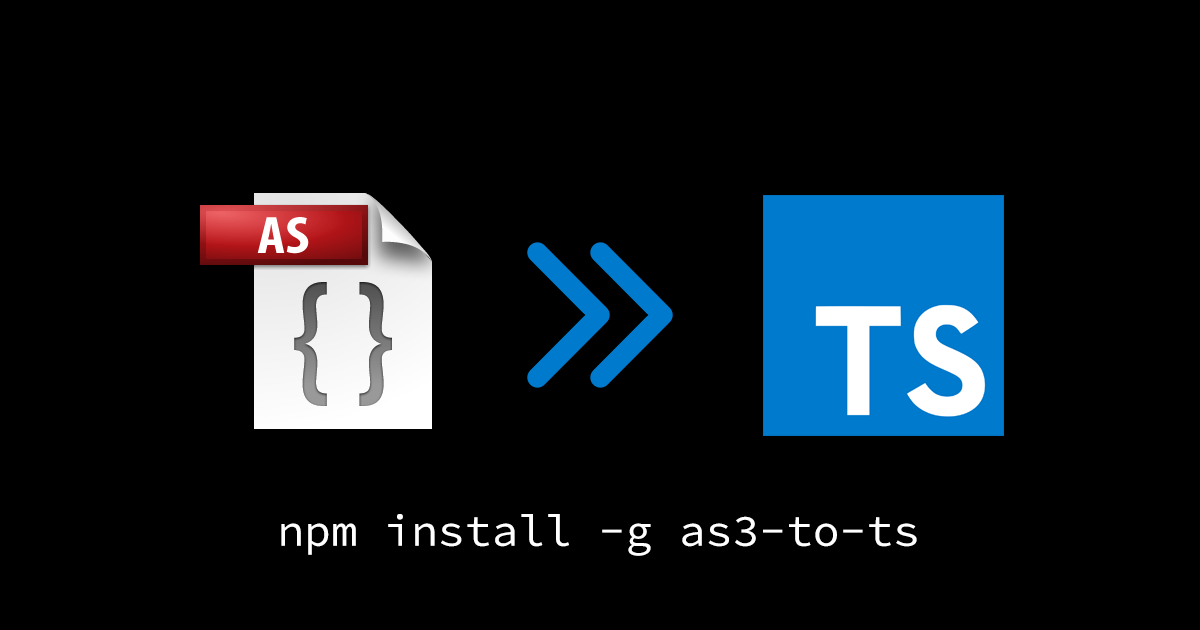
<style>
.page{position:relative;width:1200px;height:630px;background:#000000}
.page>*{position:absolute;margin:0}
.t1{font:44.4px "SourceCodePro-Regular";color:#ffffff}
</style>
<div class="page">
<p class="t1" style="left:281px;top:514px;width:636px;height:42px">npm install -g as3-to-ts</p>
</div>
